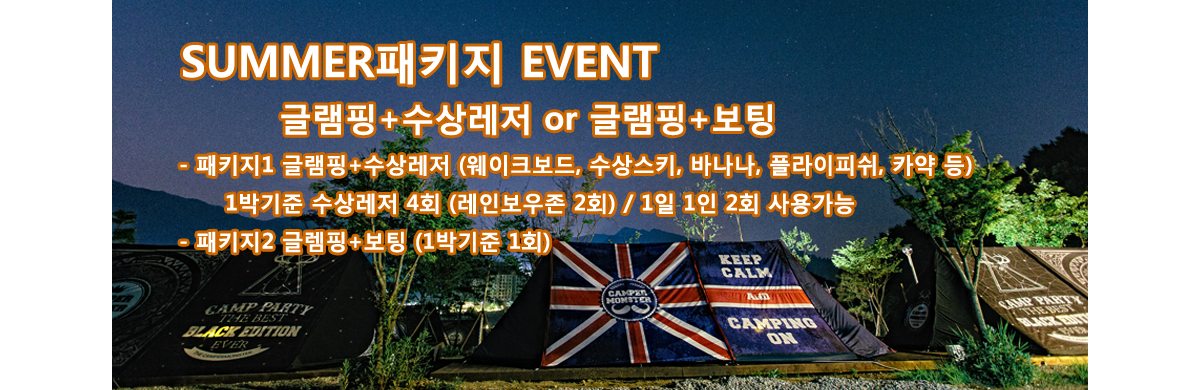
<style>
.page{position:relative;width:1200px;height:390px;background:#ffffff}
.page>*{position:absolute;margin:0}
.t1{font:43.8px "MalgunGothicBold";color:#ffffff}
.t2{font:32.8px "MalgunGothicBold";color:#ffffff}
.t3{font:21.9px "MalgunGothicBold";color:#ffffff}
</style>
<div class="page">
<p class="t1" style="left:183px;top:43px;width:475px;height:42px">SUMMER패키지 EVENT</p>
<p class="t2" style="left:281px;top:104px;width:492px;height:32px">글램핑+수상레저 or 글램핑+보팅</p>
<p class="t3" style="left:180px;top:155px;width:792px;height:98px">- 패키지1 글램핑+수상레저 (웨이크보드, 수상스키, 바나나, 플라이피쉬, 카약 등) <br>      1박기준 수상레저 4회 (레인보우존 2회) / 1일 1인 2회 사용가능<br>- 패키지2 글렘핑+보팅 (1박기준 1회)</p>
</div>
